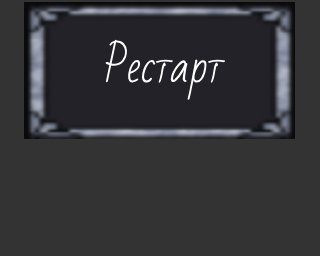
<style>
.page{position:relative;width:320px;height:256px;background:#333333}
.page>*{position:absolute;margin:0}
.t1{font:43px "BadScript-Regular";color:#ffffff}
</style>
<div class="page">
<p class="t1" style="left:105px;top:39px;width:121px;height:61px">Рестарт</p>
</div>
